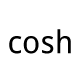
<style>
.page{position:relative;width:80px;height:80px;background:#ffffff}
.page>*{position:absolute;margin:0}
.t1{font:31.8px "DroidSans";color:#000000}
</style>
<div class="page">
<p class="t1" style="left:9px;top:29px;width:62px;height:25px">cosh</p>
</div>
